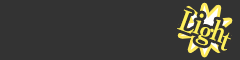
<style>
.page{position:relative;width:240px;height:60px;background:#333333}
.page>*{position:absolute;margin:0}
.t1{font:28px "RyuminPro-ExBold";letter-spacing:-0.08em;color:#fff15b;scale:0.9 1}
</style>
<div class="page">
<p class="t1" style="left:177px;top:9px;width:54px;height:42px;rotate:20deg">Light</p>
</div>
